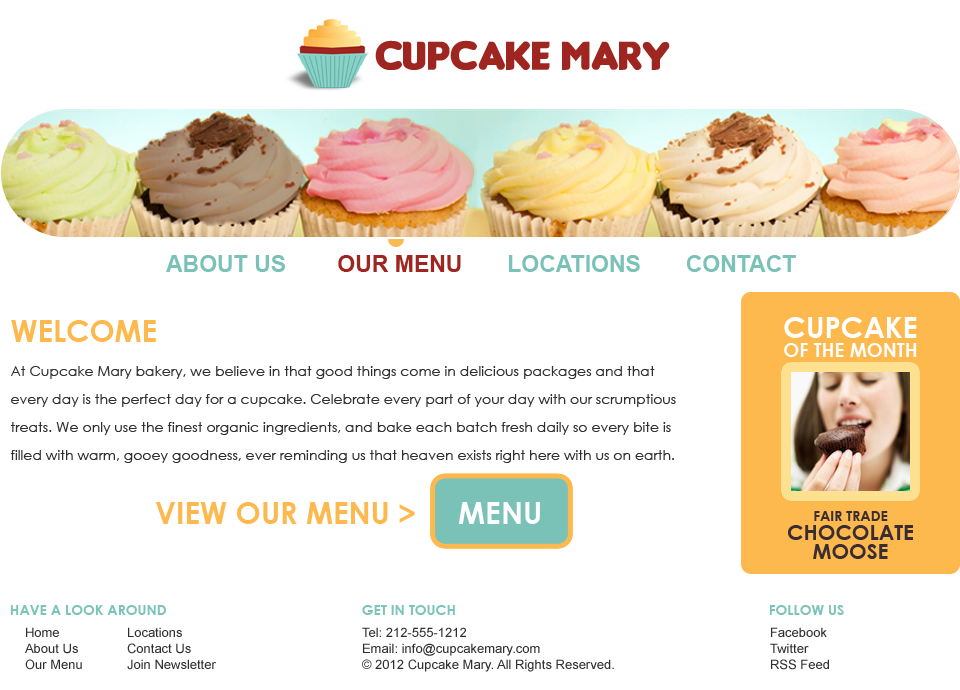
<style>
.page{position:relative;width:960px;height:690px;background:#ffffff}
.page>*{position:absolute;margin:0}
.t1{font:23px "Arial-BoldMT";color:#7ac1b7}
.t2{font:23px "Arial-BoldMT";color:#9e2520}
.t3{font:19px/19px "CenturyGothic-Bold";color:#ffffff;text-transform:uppercase}
.t4{font:29px "CenturyGothic-Bold";color:#ffffff;text-transform:uppercase}
.t5{font:30px "CenturyGothic-Bold";color:#fdb84e;text-transform:uppercase}
.t6{font:14px/28px "CenturyGothic";color:#313030}
.t7{font:30px "CenturyGothic-Bold";color:#fdb84e}
.t8{font:30px "CenturyGothic-Bold";color:#ffffff}
.t9{font:21px/19px "CenturyGothic-Bold";color:#392d32;text-transform:uppercase}
.t10{font:14px/19px "CenturyGothic-Bold";color:#392d32;text-transform:uppercase}
.t11{font:14px "CenturyGothic-Bold";color:#7cc3b9;text-transform:uppercase}
.t12{font:13px "ArialMT";color:#313030}
</style>
<div class="page">
<p class="t1" style="left:166px;top:255px;width:630px;height:17px">ABOUT US        <span class="t2">OUR MENU</span>       LOCATIONS       CONTACT</p>
<p class="t3" style="left:784px;top:317px;width:133px;height:40px;text-align:center"><span class="t4">Cupcake<br></span>of the Month</p>
<p class="t5" style="left:11px;top:320px;width:145px;height:22px">Welcome</p>
<p class="t6" style="left:10px;top:366px;width:666px;height:158px">At Cupcake Mary bakery, we believe in that good things come in delicious packages and that every day is the perfect day for a cupcake. Celebrate every part of your day with our scrumptious treats. We only use the finest organic ingredients, and bake each batch fresh daily so every bite is filled with warm, gooey goodness, ever reminding us that heaven exists right here with us on earth. <br><br><span class="t7">VIEW OUR MENU &gt;     </span><span class="t8">MENU</span></p>
<p class="t9" style="left:788px;top:511px;width:125px;height:48px;text-align:center"><span class="t10">Fair Trade<br></span>Chocolate<br>MoosE</p>
<p class="t11" style="left:10px;top:605px;width:156px;height:10px">Have a Look Around</p>
<p class="t11" style="left:362px;top:605px;width:93px;height:10px">Get in Touch</p>
<p class="t11" style="left:769px;top:605px;width:75px;height:10px">Follow Us</p>
<p class="t12" style="left:25px;top:627px;width:57px;height:43px">Home<br>About Us<br>Our Menu</p>
<p class="t12" style="left:127px;top:627px;width:89px;height:43px">Locations<br>Contact Us <br>Join Newsletter</p>
<p class="t12" style="left:362px;top:627px;width:252px;height:45px">Tel: 212-555-1212<br>Email: info@cupcakemary.com<br>© 2012 Cupcake Mary. All Rights Reserved.</p>
<p class="t12" style="left:770px;top:627px;width:59px;height:43px">Facebook<br>Twitter<br>RSS Feed</p>
</div>
